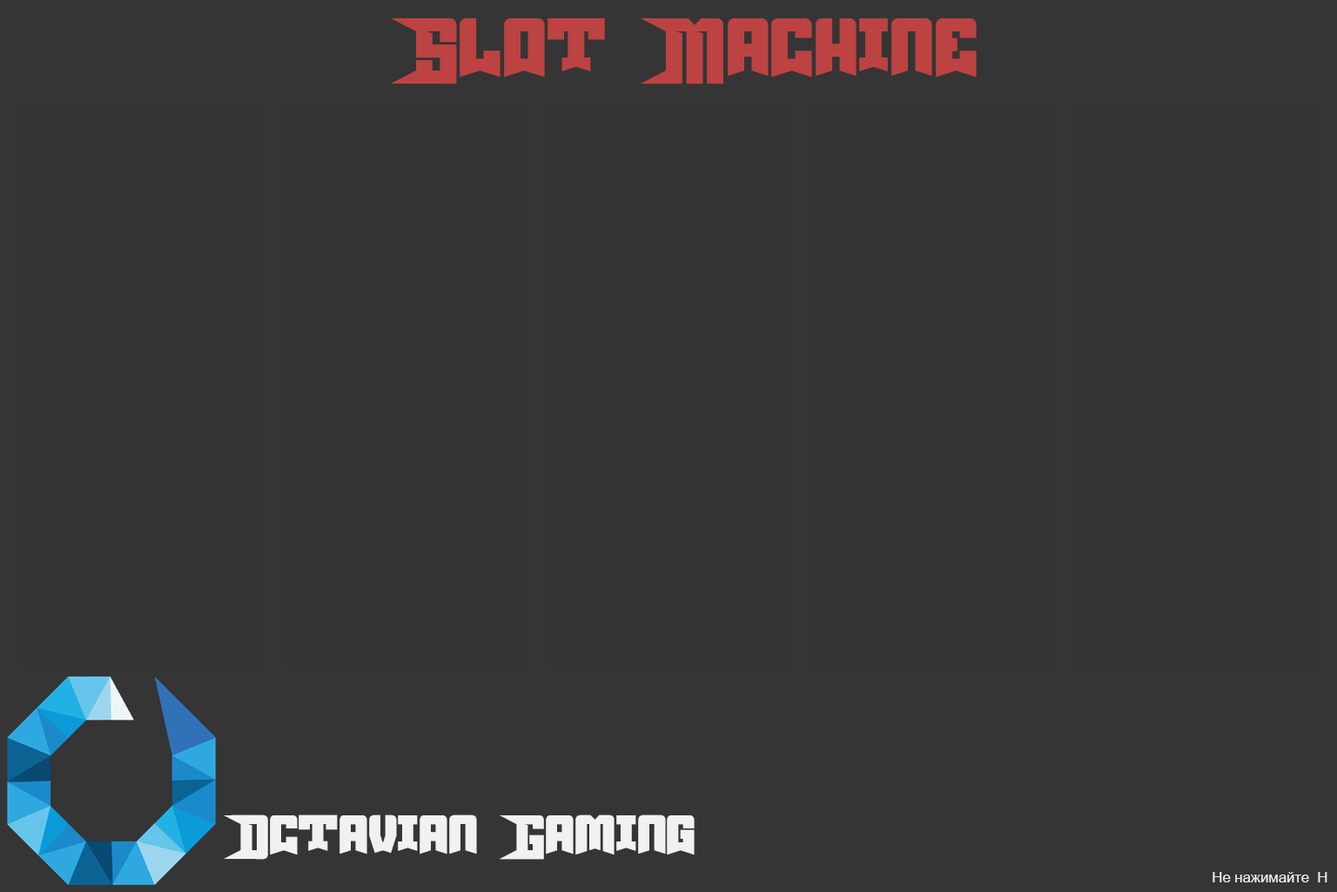
<style>
.page{position:relative;width:1337px;height:892px;background:#333333}
.page>*{position:absolute;margin:0}
.t1{font:130.6px "Robus";color:#bd4242}
.t2{font:87.1px "Robus";color:#f3f0f0}
.t3{font:14.5px "ArialMT";color:#f3f0f0}
</style>
<div class="page">
<p class="t1" style="left:391px;top:17px;width:586px;height:67px">Slot Machine</p>
<p class="t2" style="left:224px;top:814px;width:471px;height:45px">Octavian Gaming</p>
<p class="t3" style="left:1213px;top:872px;width:115px;height:10px">Не нажимайте  H</p>
</div>
